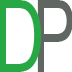
<style>
.page{position:relative;width:72px;height:72px;background:#ffffff}
.page>*{position:absolute;margin:0}
.t1{font:100.1px "ArialNarrow";color:#28a745;scale:0.85 1}
.t2{font:100.3px "ArialNarrow";color:#606661;scale:0.77 1}
</style>
<div class="page">
<p class="t1" style="left:0px;top:0px;width:41px;height:72px">D</p>
<p class="t2" style="left:37px;top:0px;width:36px;height:72px">P</p>
</div>
